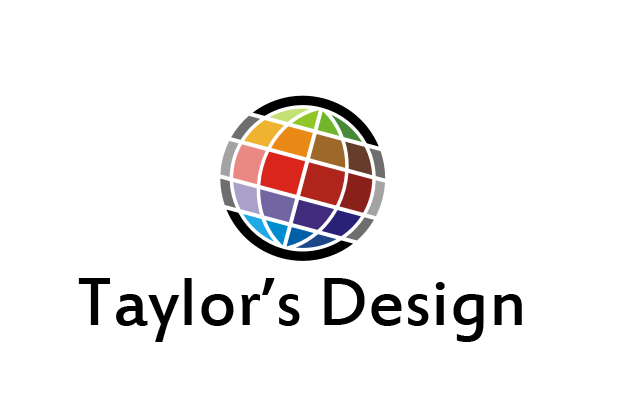
<style>
.page{position:relative;width:618px;height:409px;background:#ffffff}
.page>*{position:absolute;margin:0}
.t1{font:75px "EstrangeloEdessa";color:#000000}
</style>
<div class="page">
<p class="t1" style="left:78px;top:278px;width:444px;height:64px">Taylor’s Design</p>
</div>
